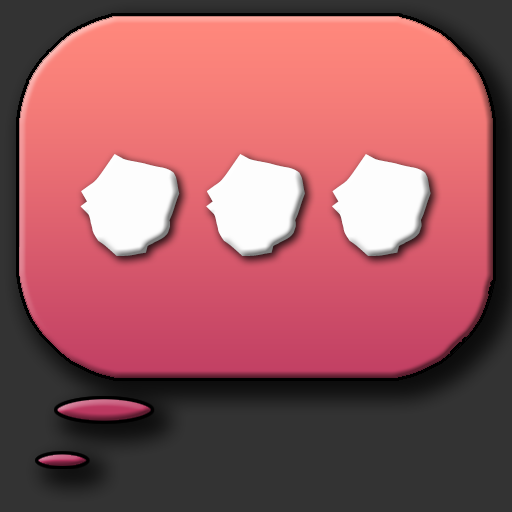
<style>
.page{position:relative;width:512px;height:512px;background:#333333}
.page>*{position:absolute;margin:0}
.t1{font:550px "PermanentMarker";color:#fdfdfd}
</style>
<div class="page">
<p class="t1" style="left:80px;top:154px;width:351px;height:102px">...</p>
<p class="t1" style="left:80px;top:154px;width:351px;height:102px">...</p>
</div>
